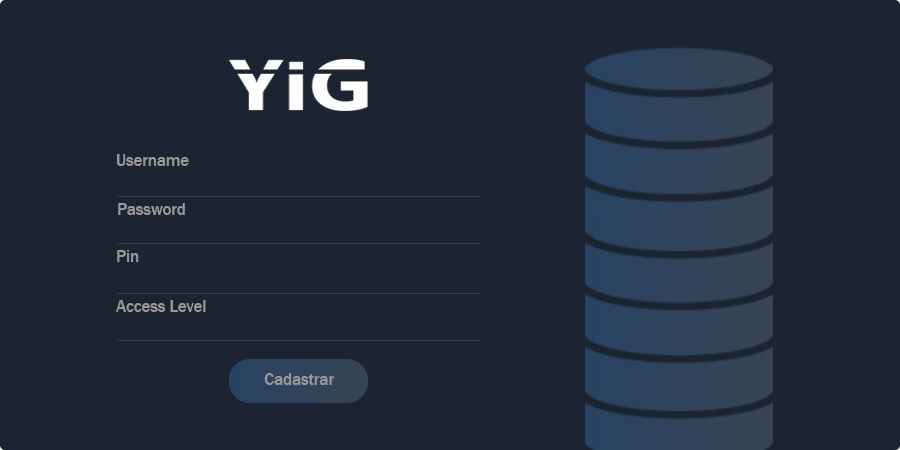
<style>
.page{position:relative;width:900px;height:450px;background:#1b2430}
.page>*{position:absolute;margin:0}
.t1{font:16.7px "FranklinGothic-Medium";color:#989898}
</style>
<div class="page">
<p class="t1" style="left:117px;top:154px;width:72px;height:12px">Username</p>
<p class="t1" style="left:118px;top:203px;width:67px;height:12px">Password</p>
<p class="t1" style="left:117px;top:250px;width:22px;height:12px">Pin</p>
<p class="t1" style="left:116px;top:300px;width:90px;height:12px">Access Level</p>
<p class="t1" style="left:264px;top:373px;width:70px;height:12px">Cadastrar</p>
</div>
